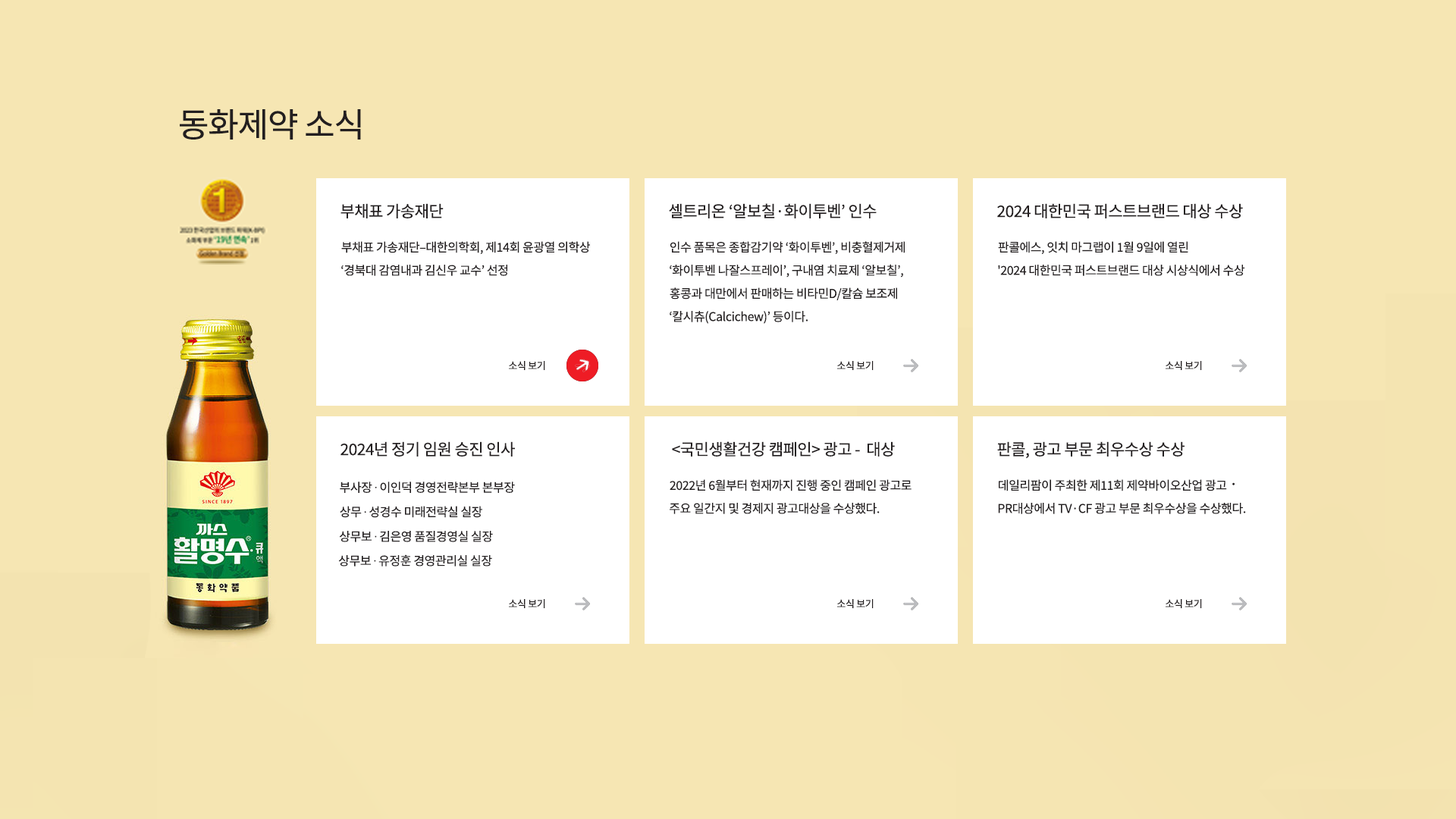
<style>
.page{position:relative;width:1456px;height:819px;background:#f6e6b3}
.page>*{position:absolute;margin:0}
.t1{font:33.4px "NotoSansKR-Regular";letter-spacing:-0.025em;color:#231f20}
.t2{font:15.9px "NotoSansKR-Regular";letter-spacing:-0.025em;color:#231f20}
.t3{font:12.1px "NotoSansKR-Regular";letter-spacing:-0.025em;color:#231f20}
.t4{font:9.9px "NotoSansKR-Regular";letter-spacing:-0.025em;color:#231f20}
.t5{font:12.1px "Gulim";letter-spacing:-0.025em;color:#231f20}
</style>
<div class="page">
<p class="t1" style="left:180px;top:109px;width:181px;height:31px">동화제약 소식</p>
<p class="t2" style="left:340px;top:203px;width:104px;height:15px">부채표 가송재단</p>
<p class="t2" style="left:669px;top:203px;width:208px;height:15px">셀트리온 ‘알보칠·화이투벤’ 인수</p>
<p class="t2" style="left:997px;top:203px;width:246px;height:15px">2024 대한민국 퍼스트브랜드 대상 수상</p>
<p class="t3" style="left:341px;top:241px;width:249px;height:13px">부채표 가송재단–대한의학회, 제14회 윤광열 의학상</p>
<p class="t3" style="left:670px;top:241px;width:235px;height:13px">인수 품목은 종합감기약 ‘화이투벤’, 비충혈제거제</p>
<p class="t3" style="left:998px;top:241px;width:190px;height:13px">판콜에스, 잇치 마그랩이 1월 9일에 열린</p>
<p class="t3" style="left:341px;top:265px;width:166px;height:11px">‘경북대 감염내과 김신우 교수’ 선정</p>
<p class="t3" style="left:670px;top:264px;width:233px;height:14px">‘화이투벤 나잘스프레이’, 구내염 치료제 ‘알보칠’,</p>
<p class="t3" style="left:998px;top:265px;width:247px;height:11px">'2024 대한민국 퍼스트브랜드 대상 시상식에서 수상</p>
<p class="t3" style="left:670px;top:287px;width:227px;height:13px">홍콩과 대만에서 판매하는 비타민D/칼슘 보조제</p>
<p class="t3" style="left:670px;top:311px;width:138px;height:13px">‘칼시츄(Calcichew)’ 등이다.</p>
<p class="t4" style="left:509px;top:361px;width:36px;height:9px">소식 보기</p>
<p class="t4" style="left:837px;top:361px;width:37px;height:9px">소식 보기</p>
<p class="t4" style="left:1166px;top:361px;width:36px;height:9px">소식 보기</p>
<p class="t2" style="left:340px;top:441px;width:175px;height:16px">2024년 정기 임원 승진 인사</p>
<p class="t2" style="left:672px;top:441px;width:223px;height:16px">&lt;국민생활건강 캠페인&gt; 광고 -  대상</p>
<p class="t2" style="left:997px;top:441px;width:188px;height:18px">판콜, 광고 부문 최우수상 수상</p>
<p class="t3" style="left:340px;top:482px;width:175px;height:11px">부사장 <span class="t5">∙</span> 이인덕 경영전략본부 본부장</p>
<p class="t3" style="left:670px;top:479px;width:242px;height:12px">2022년 6월부터 현재까지 진행 중인 캠페인 광고로</p>
<p class="t3" style="left:999px;top:479px;width:236px;height:12px">데일리팜이 주최한 제11회 제약바이오산업 광고 <span class="t2">·</span></p>
<p class="t3" style="left:340px;top:506px;width:142px;height:12px">상무 <span class="t5">∙</span> 성경수 미래전략실 실장</p>
<p class="t3" style="left:670px;top:503px;width:210px;height:11px">주요 일간지 및 경제지 광고대상을 수상했다.</p>
<p class="t3" style="left:998px;top:503px;width:248px;height:11px">PR대상에서 TV·CF 광고 부문 최우수상을 수상했다.</p>
<p class="t3" style="left:339px;top:531px;width:154px;height:11px">상무보 <span class="t5">∙</span> 김은영 품질경영실 실장</p>
<p class="t3" style="left:338px;top:554px;width:154px;height:12px">상무보 <span class="t5">∙</span> 유정훈 경영관리실 실장</p>
<p class="t4" style="left:509px;top:599px;width:36px;height:9px">소식 보기</p>
<p class="t4" style="left:837px;top:599px;width:37px;height:9px">소식 보기</p>
<p class="t4" style="left:1166px;top:599px;width:36px;height:9px">소식 보기</p>
</div>
